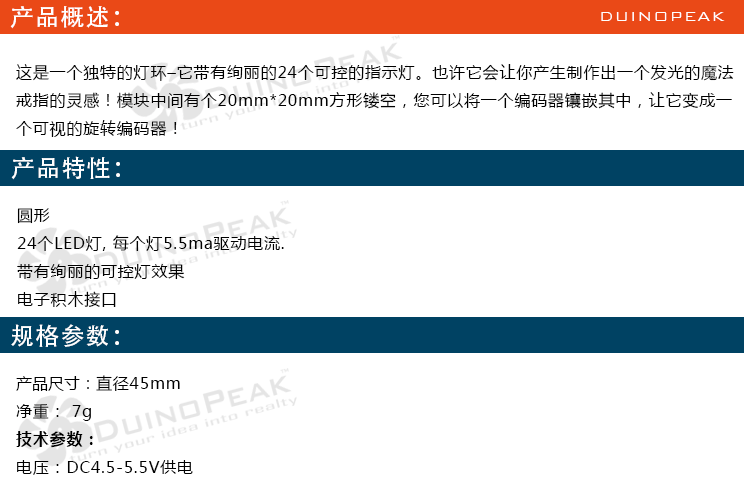
<style>
.page{position:relative;width:744px;height:482px;background:#ffffff}
.page>*{position:absolute;margin:0}
.t1{font:24px "AdobeHeitiStd-Regular";letter-spacing:0.05em;color:#ffffff}
.t2{font:18px "BankGothicBT-Light";letter-spacing:0.05em;color:#ffffff}
.t3{font:16px "MicrosoftYaHei";letter-spacing:0.05em;color:#000000}
.t4{font:16px "MicrosoftYaHei";color:#000000}
.t5{font:16px "MicrosoftYaHei-Bold";letter-spacing:0.05em;color:#000000}
</style>
<div class="page">
<p class="t1" style="left:10px;top:6px;width:109px;height:23px">产品概述：</p>
<p class="t2" style="left:601px;top:12px;width:124px;height:9px">DUINOPEAK</p>
<p class="t3" style="left:16px;top:64px;width:718px;height:73px">这是一个独特的灯环–它带有绚丽的24个可控的指示灯。也许它会让你产生制作出一个发光的魔法<br>戒指的灵感！模块中间有个20mm*20mm方形镂空，您可以将一个编码器镶嵌其中，让它变成一<br>个可视的旋转编码器！</p>
<p class="t1" style="left:11px;top:156px;width:109px;height:24px">产品特性：</p>
<p class="t3" style="left:17px;top:208px;width:267px;height:99px">圆形<br>24个LED灯, 每个灯5.5ma驱动电流.<br>带有绚丽的可控灯效果<br>电子积木接口</p>
<p class="t1" style="left:11px;top:324px;width:108px;height:23px">规格参数：</p>
<p class="t3" style="left:16px;top:375px;width:177px;height:100px"><span class="t4">产品尺寸：</span>直径45mm<br>净重： 7g<br><span class="t5">技术参数：<br></span>电压：DC4.5-5.5V供电</p>
</div>
